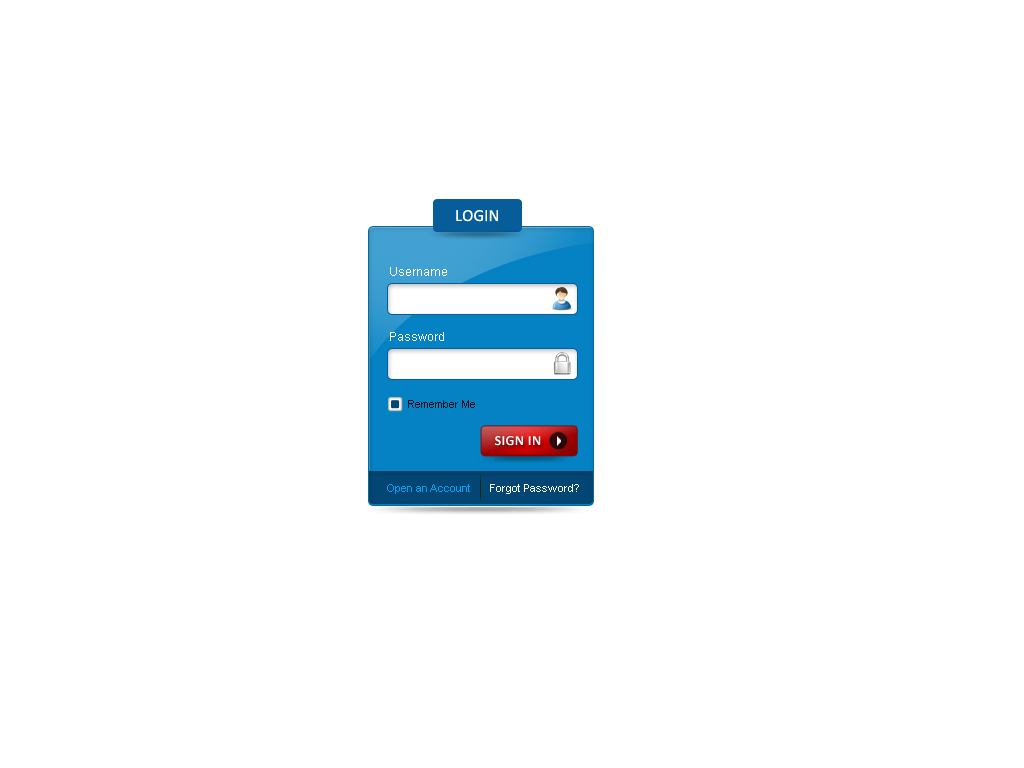
<style>
.page{position:relative;width:1024px;height:768px;background:#ffffff}
.page>*{position:absolute;margin:0}
.t1{font:17px "Calibri";color:#ffffff}
.t2{font:12px "ArialMT";color:#ffffff}
.t3{font:11px "ArialMT";color:#041323}
.t4{font:13.8px "Calibri-Bold";letter-spacing:0.03em;color:#ffffff}
.t5{font:11px "ArialMT";color:#06a1f1}
.t6{font:11px "ArialMT";color:#ffffff}
</style>
<div class="page">
<p class="t1" style="left:456px;top:210px;width:42px;height:12px">LOGIN</p>
<p class="t2" style="left:390px;top:267px;width:57px;height:9px">Username</p>
<p class="t2" style="left:390px;top:332px;width:54px;height:9px">Password</p>
<p class="t3" style="left:408px;top:400px;width:67px;height:8px">Remember Me</p>
<p class="t4" style="left:495px;top:436px;width:46px;height:10px">SIGN IN</p>
<p class="t5" style="left:387px;top:484px;width:83px;height:10px">Open an Account</p>
<p class="t6" style="left:490px;top:484px;width:89px;height:10px">Forgot Password?</p>
</div>
